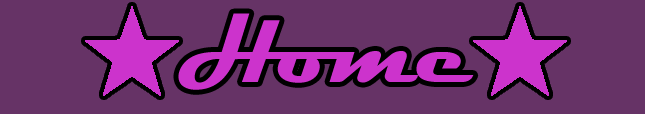
<style>
.page{position:relative;width:645px;height:114px;background:#663366}
.page>*{position:absolute;margin:0}
.t1{font:90px "Magneto-Bold";color:#cc33cc}
</style>
<div class="page">
<p class="t1" style="left:178px;top:13px;width:296px;height:77px">Home</p>
</div>
